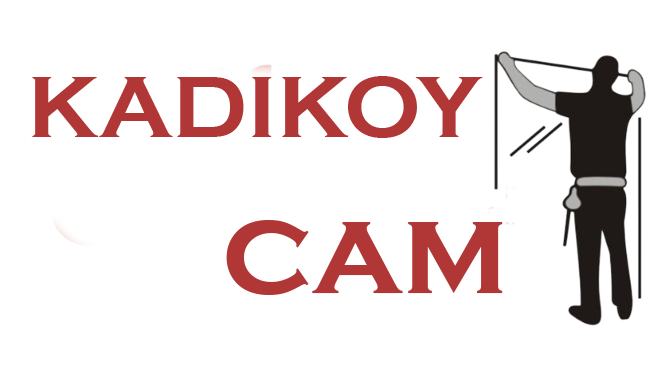
<style>
.page{position:relative;width:666px;height:375px;background:#ffffff}
.page>*{position:absolute;margin:0}
.t1{font:90px "CopperplateGothic-Bold";color:#b13636}
.t2{font:130px "CopperplateGothic-Bold";color:#b13636}
</style>
<div class="page">
<p class="t1" style="left:32px;top:76px;width:471px;height:219px">KADIKOY<br><span class="t2">      cam</span></p>
</div>
